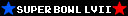
<style>
.page{position:relative;width:128px;height:16px;background:#000000}
.page>*{position:absolute;margin:0}
.t1{font:14px "ArcadeClassic";color:#ffffff;scale:0.9 1}
</style>
<div class="page">
<p class="t1" style="left:17px;top:6px;width:94px;height:7px">SUPER BOWL LVII</p>
</div>
